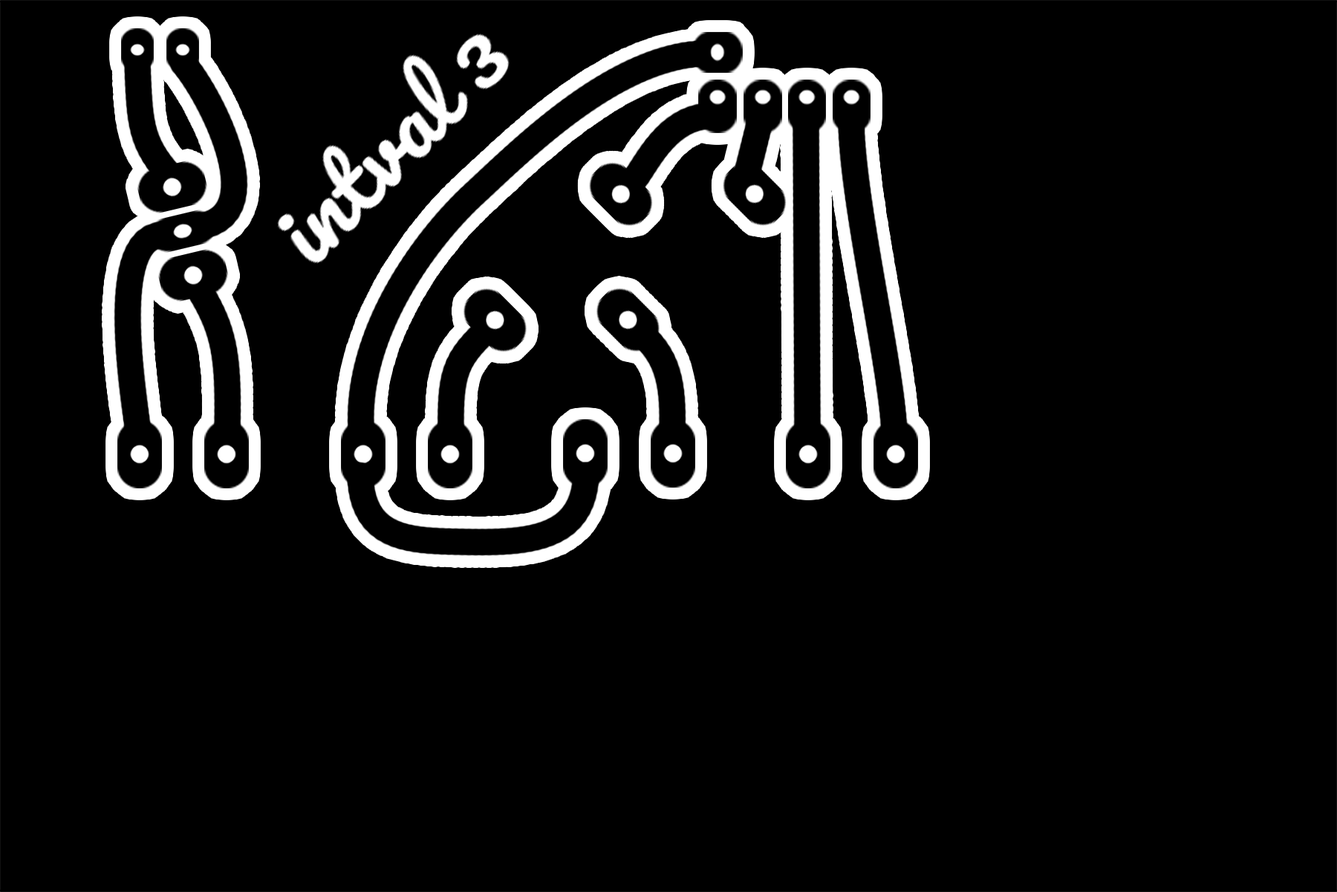
<style>
.page{position:relative;width:1337px;height:892px;background:#000000}
.page>*{position:absolute;margin:0}
.t1{font:85.8px "Pacifico-Regular";color:#ffffff;scale:1.06 1}
</style>
<div class="page">
<p class="t1" style="left:276px;top:33px;width:234px;height:232px;rotate:-46deg">intval 3</p>
</div>
